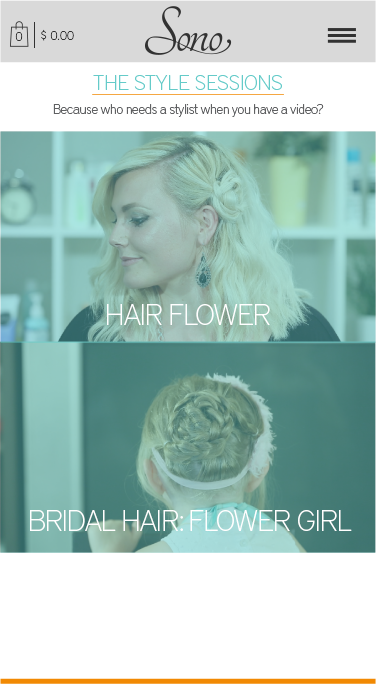
<style>
.page{position:relative;width:376px;height:691px;background:#ffffff}
.page>*{position:absolute;margin:0}
.t1{font:12.4px "DistrictPro-Thin";color:#323232}
.t2{font:21px "DistrictPro-Thin";color:#65cbc9}
.t3{font:14px "DistrictPro-Thin";letter-spacing:-0.031em;color:#5f6062}
.t4{font:30px "DistrictPro-Thin";letter-spacing:-0.031em;color:#ffffff}
</style>
<div class="page">
<p class="t1" style="left:41px;top:29px;width:33px;height:12px">$ 0.00</p>
<p class="t1" style="left:15px;top:32px;width:8px;height:9px">0</p>
<p class="t2" style="left:93px;top:75px;width:189px;height:15px">THE STYLE SESSIONS</p>
<p class="t3" style="left:53px;top:104px;width:271px;height:13px">Because who needs a stylist when you have a video?</p>
<p class="t4" style="left:107px;top:304px;width:163px;height:21px">HAIR FLOWER</p>
<p class="t4" style="left:30px;top:510px;width:322px;height:21px">BRIDAL HAIR: FLOWER GIRL</p>
</div>
